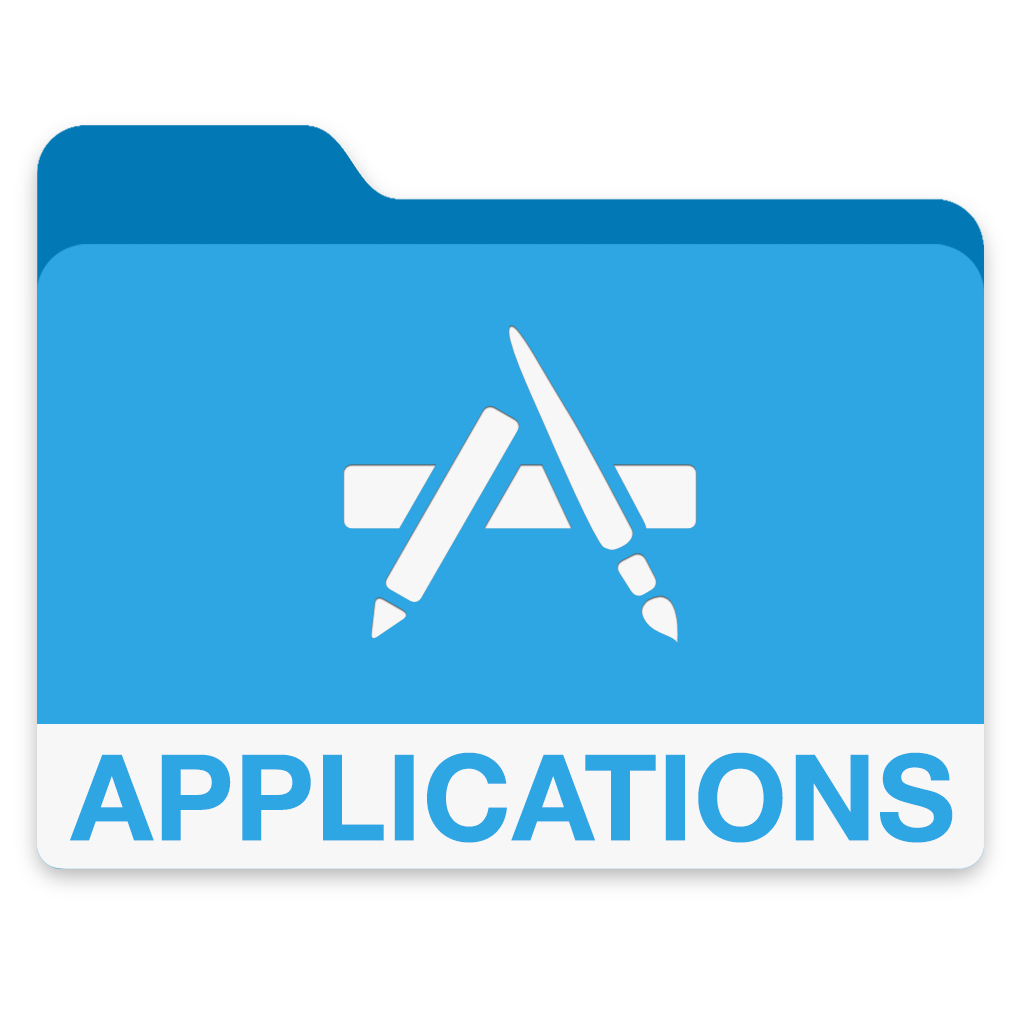
<style>
.page{position:relative;width:1024px;height:1024px;background:#2ea6e4}
.page>*{position:absolute;margin:0}
.t1{font:120px "HelveticaNeue-Bold";letter-spacing:0.005em;color:#2ea6e4}
</style>
<div class="page">
<p class="t1" style="left:69px;top:752px;width:884px;height:91px">APPLICATIONS</p>
</div>
